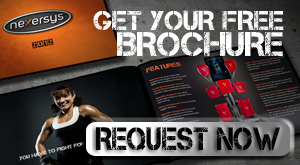
<style>
.page{position:relative;width:300px;height:165px}
.page>*{position:absolute;margin:0}
.t1{font:27.4px/24.9px "Captureit";color:#ffffff;text-transform:uppercase}
.t2{font:34px/26.5px "Captureit";color:#ffffff;text-transform:uppercase}
.t3{font:32.3px "Captureit";color:#000000;text-transform:uppercase;scale:0.86 1}
</style>
<div class="page">
<p class="t1" style="left:93px;top:10px;width:191px;height:47px;text-align:right">Get your free<br><span class="t2">Brochure</span></p>
<p class="t3" style="left:96px;top:127px;width:184px;height:24px">request now</p>
</div>
